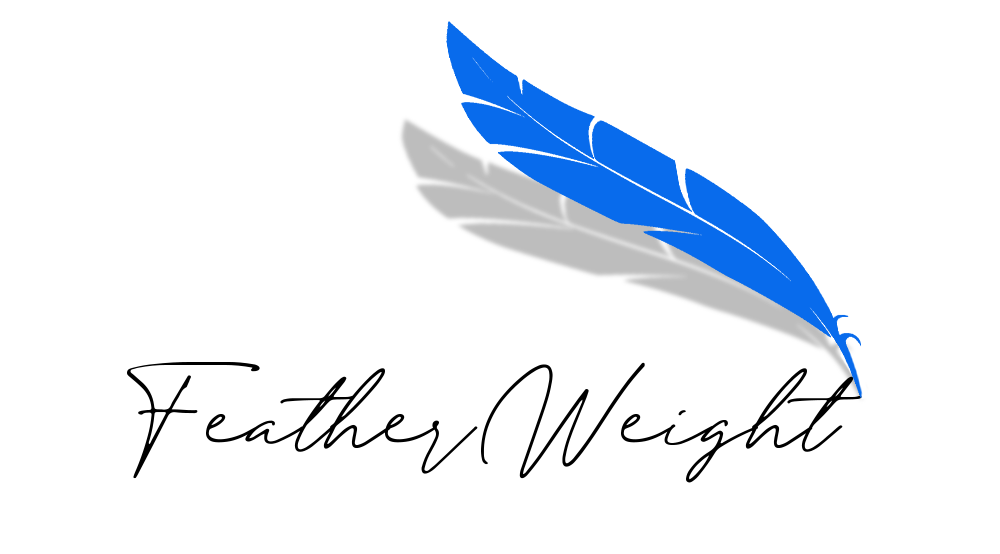
<style>
.page{position:relative;width:1000px;height:554px;background:#ffffff}
.page>*{position:absolute;margin:0}
.t1{font:158px "AndelliaDavilton";color:#000000}
</style>
<div class="page">
<p class="t1" style="left:127px;top:362px;width:735px;height:121px">FeatherWeight</p>
</div>
